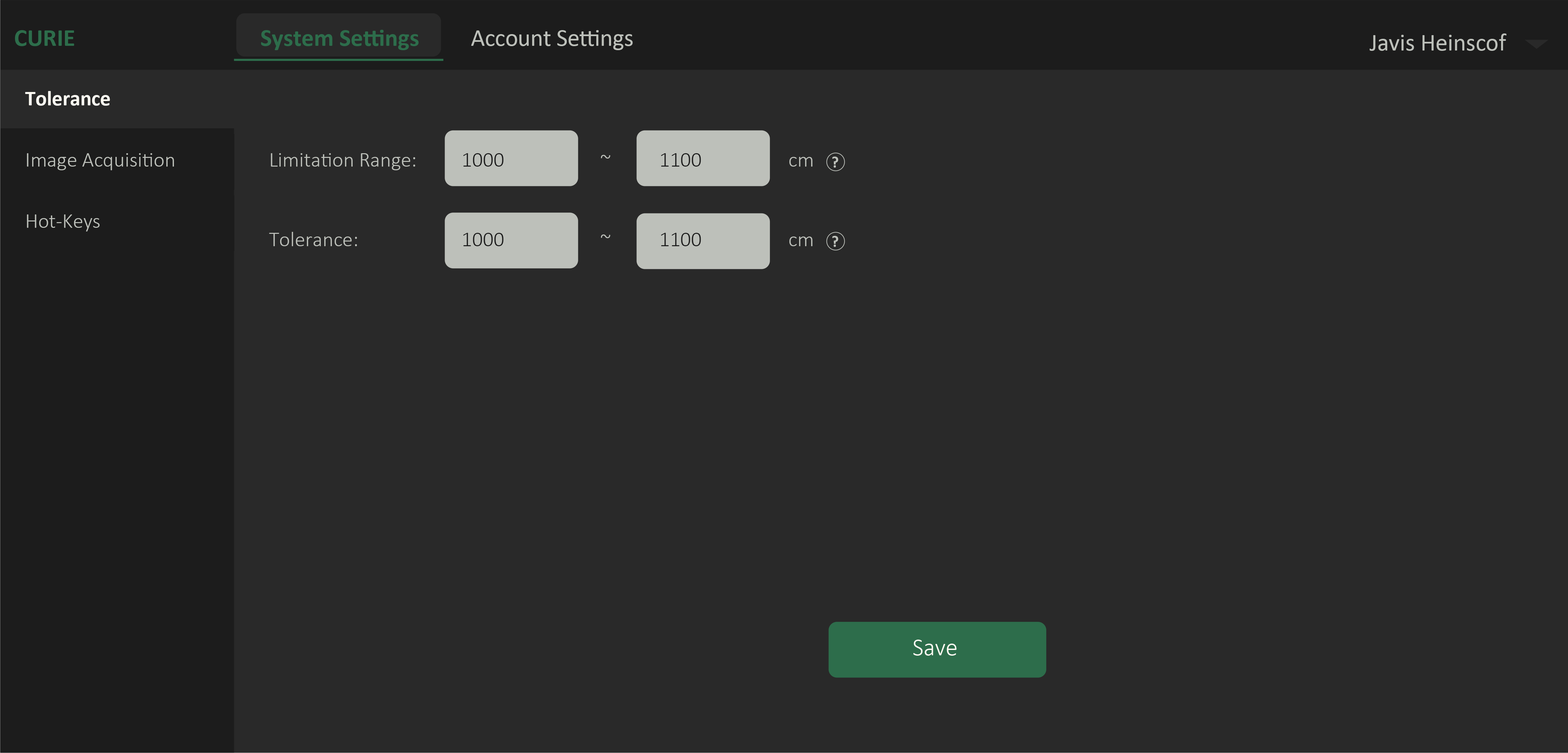
<style>
.page{position:relative;width:1568px;height:753px;background:#292929}
.page>*{position:absolute;margin:0}
.t1{font:24.4px "Calibri-Bold";color:#2d6d4b}
.t2{font:24.4px "Calibri";letter-spacing:-0.008em;color:#bdc0ba}
.t3{font:24.4px "Calibri";color:#bdc0ba}
.t4{font:24.4px "Calibri";letter-spacing:-0.016em;color:#bdc0ba}
.t5{font:24.4px "Calibri";letter-spacing:-0.007em;color:#bdc0ba}
.t6{font:20.9px "Calibri-Bold";color:#fcfaf2}
.t7{font:20.9px "Calibri-Light";letter-spacing:0.004em;color:#bdc0ba}
.t8{font:15.7px "Calibri-Bold";color:#bdc0ba}
.t9{font:20.9px "Calibri-Light";color:#bdc0ba}
.t10{font:24.4px "Calibri-Light";color:#fcfaf2}
</style>
<div class="page">
<p class="t1" style="left:261px;top:30px;width:158px;height:20px">System Settings</p>
<p class="t1" style="left:15px;top:30px;width:59px;height:16px">CURIE</p>
<p class="t2" style="left:471px;top:30px;width:162px;height:20px">Account Settings</p>
<p class="t3" style="left:1370px;top:33px;width:136px;height:18px">J<span class="t4">a</span>vis Heins<span class="t5">c</span>of</p>
<p class="t6" style="left:25px;top:91px;width:85px;height:15px">Tolerance</p>
<p class="t7" style="left:27px;top:153px;width:147px;height:17px">Image Acquisition</p>
<p class="t7" style="left:271px;top:153px;width:144px;height:17px">Limitation Range:</p>
<p class="t8" style="left:832px;top:157px;width:6px;height:11px">?</p>
<p class="t9" style="left:27px;top:214px;width:73px;height:18px">Hot-Keys</p>
<p class="t7" style="left:269px;top:232px;width:88px;height:14px">Tolerance:</p>
<p class="t8" style="left:832px;top:236px;width:6px;height:11px">?</p>
<p class="t10" style="left:913px;top:640px;width:44px;height:16px">Save</p>
</div>
